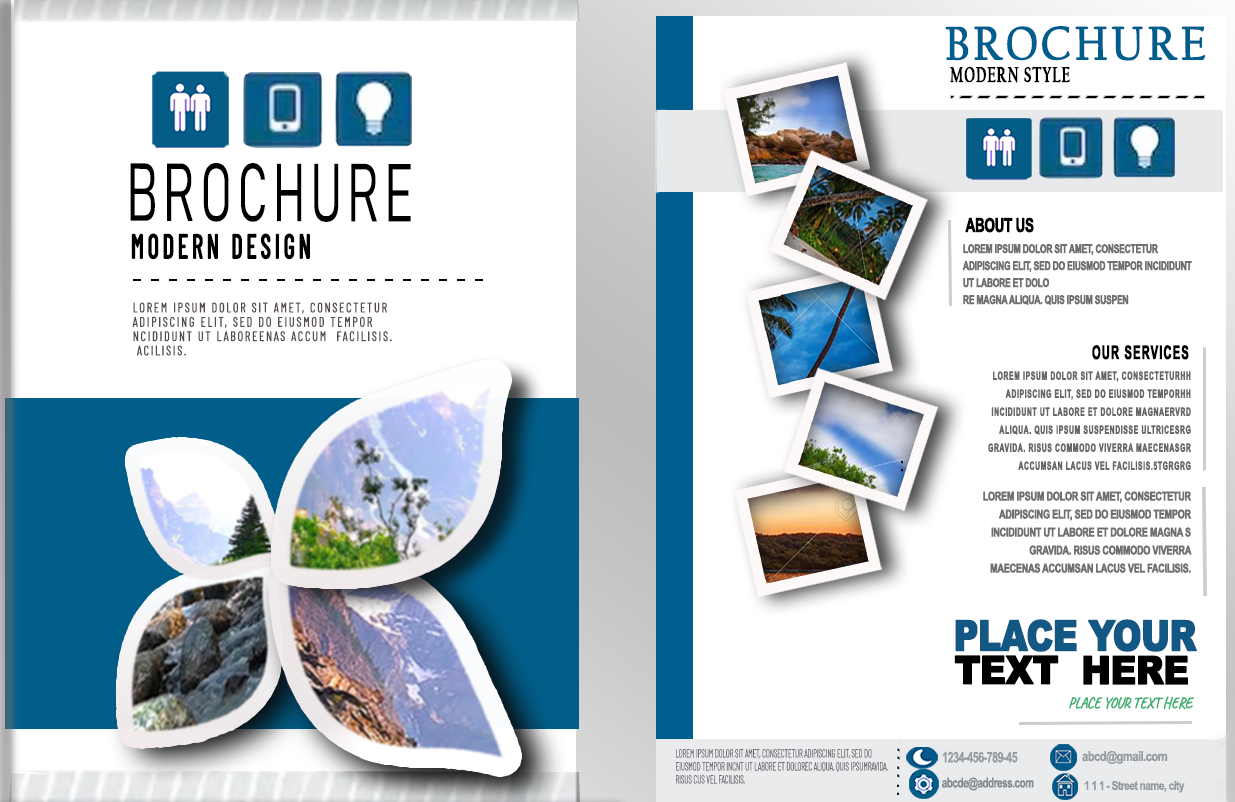
<style>
.page{position:relative;width:1235px;height:802px;background:#ffffff}
.page>*{position:absolute;margin:0}
.t1{font:48.1px "CalifornianFB-Reg";letter-spacing:0.06em;color:#005e8e;text-transform:uppercase;font-weight:bold;scale:0.9 1}
.t2{font:22px "CalifornianFB-Bold";letter-spacing:0.06em;color:#000000;text-transform:uppercase;font-weight:bold;scale:0.63 1}
.t3{font:80.7px "Bahnschrift_300.000wght_91.000wdth";letter-spacing:0.1em;color:#000000;font-weight:bold;scale:0.68 1}
.t4{font:19px "ArialNarrow-Bold";letter-spacing:-0.04em;color:#000000;text-transform:uppercase;font-weight:bold;scale:0.86 1}
.t5{font:34.3px "BarlowCondensed-Medium";letter-spacing:0.12em;color:#000000;text-transform:uppercase;font-weight:bold;scale:0.72 1}
.t6{font:12.1px/17px "ArialNarrow-Bold";letter-spacing:-0.04em;color:#707070;text-transform:uppercase;font-weight:bold;scale:0.85 1}
.t7{font:13.6px/14.3px "BarlowCondensed-Light";letter-spacing:0.12em;color:#554d4d;text-transform:uppercase;font-weight:bold;scale:0.9 1}
.t8{font:18.9px "ArialNarrow-Bold";letter-spacing:0.06em;color:#000000;text-transform:uppercase;font-weight:bold;scale:0.72 1}
.t9{font:11.4px/18px "ArialNarrow-Bold";letter-spacing:0.06em;color:#696767;text-transform:uppercase;font-weight:bold;scale:0.71 1}
.t10{font:12.2px/18px "ArialNarrow-Bold";letter-spacing:-0.04em;color:#707070;text-transform:uppercase;font-weight:bold;scale:0.89 1}
.t11{font:42px "Arial-Black";letter-spacing:-0.04em;color:#135784;text-transform:uppercase;font-weight:bold;scale:0.82 1}
.t12{font:39.1px "Arial-Black";letter-spacing:-0.04em;color:#000000;text-transform:uppercase;font-weight:bold;scale:0.91 1}
.t13{font:15.6px "Caveat-Regular";letter-spacing:-0.04em;color:#40af6f;text-transform:uppercase;font-weight:bold;scale:0.89 1}
.t14{font:11.5px/13px "BarlowCondensed-Thin";letter-spacing:-0.04em;color:#6f7174;text-transform:uppercase;font-weight:bold;scale:0.77 1}
.t15{font:14.7px "ArialNarrow-Bold";letter-spacing:-0.04em;color:#989c9f;scale:0.9 1}
.t16{font:13.6px "ArialNarrow-Bold";letter-spacing:-0.04em;color:#989c9f}
.t17{font:13.7px "ArialNarrow-Bold";letter-spacing:-0.04em;color:#858b8d;scale:0.89 1}
.t18{font:12.2px "ArialNarrow-Bold";letter-spacing:-0.04em;color:#989c9f}
</style>
<div class="page">
<p class="t1" style="left:945px;top:26px;width:261px;height:35px">BROCHURE</p>
<p class="t2" style="left:950px;top:66px;width:120px;height:17px">MODERN STYLE</p>
<p class="t3" style="left:130px;top:163px;width:281px;height:59px">BROCHURE</p>
<p class="t4" style="left:965px;top:217px;width:69px;height:16px">ABOUT US</p>
<p class="t5" style="left:131px;top:233px;width:179px;height:27px">MODERN DESIGN</p>
<p class="t6" style="left:962px;top:244px;width:230px;height:61px">Lorem ipsum dolor sit amet, consectetur adipiscing elit, sed do eiusmod tempor incididunt ut labore et dolo<br>re magna aliqua. Quis ipsum suspen<br>disse ultrices gravida. Risus commodo viverra maecenas accumsan lacus vel facilisis.</p>
<p class="t7" style="left:132px;top:302px;width:260px;height:54px">Lorem ipsum dolor sit amet, consectetur adipiscing elit, sed do eiusmod tempor ncididunt ut laboreenas accum  facilisis. <br> acilisis.</p>
<p class="t8" style="left:1092px;top:345px;width:97px;height:15px">OUR SERVICES</p>
<p class="t9" style="left:988px;top:371px;width:203px;height:100px;text-align:right">Lorem ipsum dolor sit amet, consecteturHH adipiscing elit, sed do eiusmod temporHH incididunt ut labore et dolore magnaERVRD aliqua. Quis ipsum suspendisse ultricesRG gravida. Risus commodo viverra maecenasGR accumsan lacus vel facilisis.5TGRGRG</p>
<p class="t10" style="left:983px;top:491px;width:209px;height:82px;text-align:right">Lorem ipsum dolor sit amet, consectetur adipiscing elit, sed do eiusmod tempor incididunt ut labore et dolore magna s gravida. Risus commodo viverra maecenas accumsan lacus vel facilisis.</p>
<p class="t11" style="left:955px;top:619px;width:242px;height:33px">PLACE YOUR</p>
<p class="t12" style="left:954px;top:655px;width:234px;height:30px">TEXT  HERE</p>
<p class="t13" style="left:1069px;top:696px;width:125px;height:14px">Place your text here</p>
<p class="t14" style="left:676px;top:749px;width:212px;height:35px">Lorem ipsum dolor sit amet, consectetur adipiscing elit, sed do eiusmod tempor incnt ut labore et dolorec aliqua. Quis ipsumravida. Risus cus vel facilisis.</p>
<p class="t15" style="left:943px;top:751px;width:75px;height:12px">1234-456-789-45</p>
<p class="t16" style="left:1082px;top:751px;width:86px;height:13px">abcd@gmail.com</p>
<p class="t17" style="left:942px;top:777px;width:92px;height:14px">abcde@address.com</p>
<p class="t18" style="left:1084px;top:780px;width:101px;height:13px">1 1 1 - Street name, city</p>
</div>
